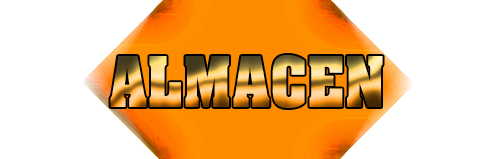
<style>
.page{position:relative;width:504px;height:159px;background:#ffffff}
.page>*{position:absolute;margin:0}
.t1{font:68.6px "AachenBT-Bold";scale:0.85 1}
</style>
<div class="page">
<p class="t1" style="left:110px;top:55px;width:273px;height:53px">ALMACEN</p>
</div>
